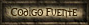
<style>
.page{position:relative;width:89px;height:25px}
.page>*{position:absolute;margin:0}
.t1{font:11px "Morpheus";color:#331e02}
</style>
<div class="page">
<p class="t1" style="left:10px;top:7px;width:68px;height:11px">Codigo Fuente</p>
</div>
